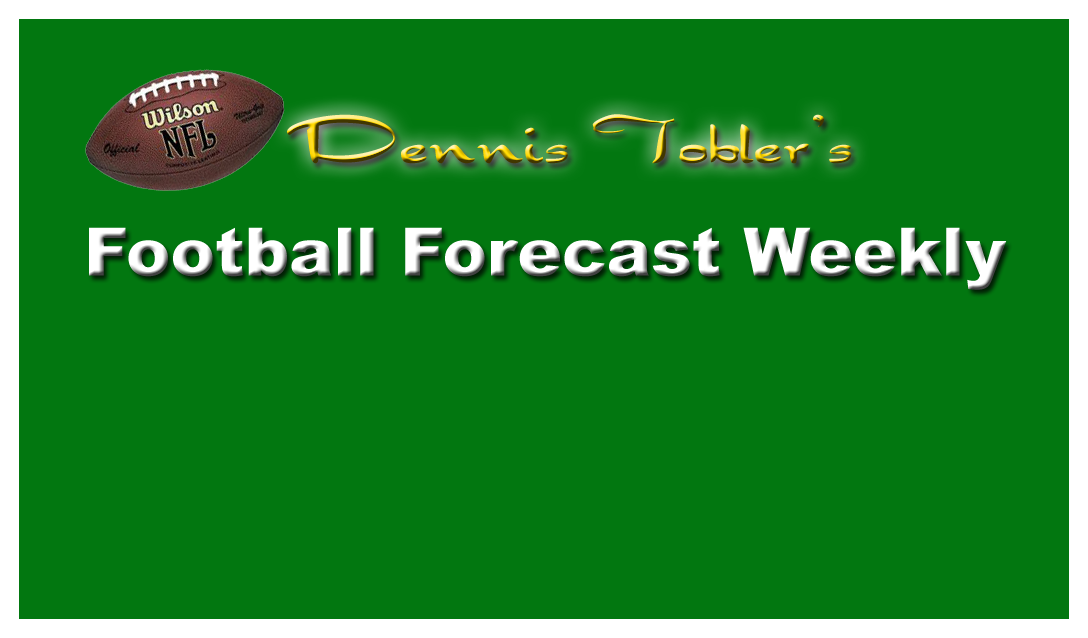
<style>
.page{position:relative;width:1088px;height:638px;background:#027710}
.page>*{position:absolute;margin:0}
.t1{font:75px "Draconian"}
.t2{font:66.7px "Arial-Black";color:#ffffff}
</style>
<div class="page">
<p class="t1" style="left:287px;top:114px;width:565px;height:50px">Dennis Tobler’s</p>
<p class="t2" style="left:89px;top:227px;width:918px;height:63px">Football Forecast Weekly</p>
</div>
